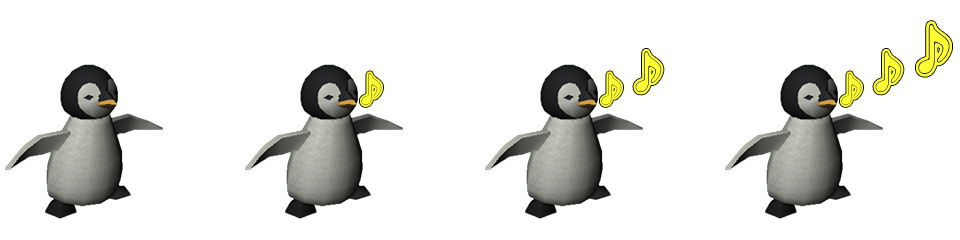
<style>
.page{position:relative;width:960px;height:240px;background:#ffffff}
.page>*{position:absolute;margin:0}
.t1{font:60.3px "DokiDokiFantasia";color:#ffff33}
.t2{font:49.3px "DokiDokiFantasia";color:#ffff33}
.t3{font:38.4px "DokiDokiFantasia";color:#ffff33}
</style>
<div class="page">
<p class="t1" style="left:916px;top:21px;width:36px;height:56px">♪</p>
<p class="t2" style="left:633px;top:49px;width:31px;height:46px">♪</p>
<p class="t2" style="left:873px;top:49px;width:31px;height:46px">♪</p>
<p class="t3" style="left:359px;top:71px;width:24px;height:36px">♪</p>
<p class="t3" style="left:599px;top:71px;width:24px;height:36px">♪</p>
<p class="t3" style="left:839px;top:71px;width:24px;height:36px">♪</p>
</div>
